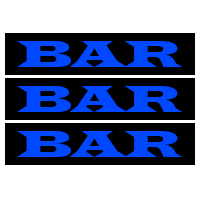
<style>
.page{position:relative;width:200px;height:200px;background:#ffffff}
.page>*{position:absolute;margin:0}
.t1{font:39px "LatinWide";color:#0048ff}
</style>
<div class="page">
<p class="t1" style="left:17px;top:41px;width:165px;height:26px">BAR</p>
<p class="t1" style="left:17px;top:86px;width:165px;height:26px">BAR</p>
<p class="t1" style="left:17px;top:131px;width:165px;height:26px">BAR</p>
</div>
